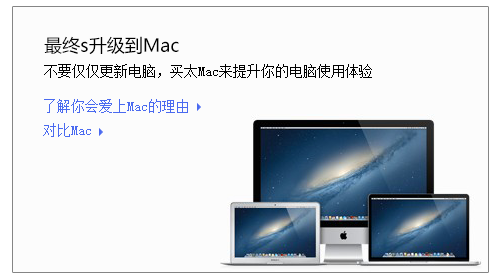
<style>
.page{position:relative;width:500px;height:280px;background:#fcfcfc}
.page>*{position:absolute;margin:0}
.t1{font:18px "MicrosoftYaHei";color:#000000}
.t2{font:14px "SimSun";color:#000000}
.t3{font:14px/24px "SimSun";color:#4a6af0}
</style>
<div class="page">
<p class="t1" style="left:44px;top:36px;width:135px;height:19px">最终s升级到Mac</p>
<p class="t2" style="left:44px;top:64px;width:328px;height:14px">不要仅仅更新电脑，买太Mac来提升你的电脑使用体验</p>
<p class="t3" style="left:43px;top:99px;width:145px;height:38px">了解你会爱上Mac的理由<br>对比Mac</p>
</div>
